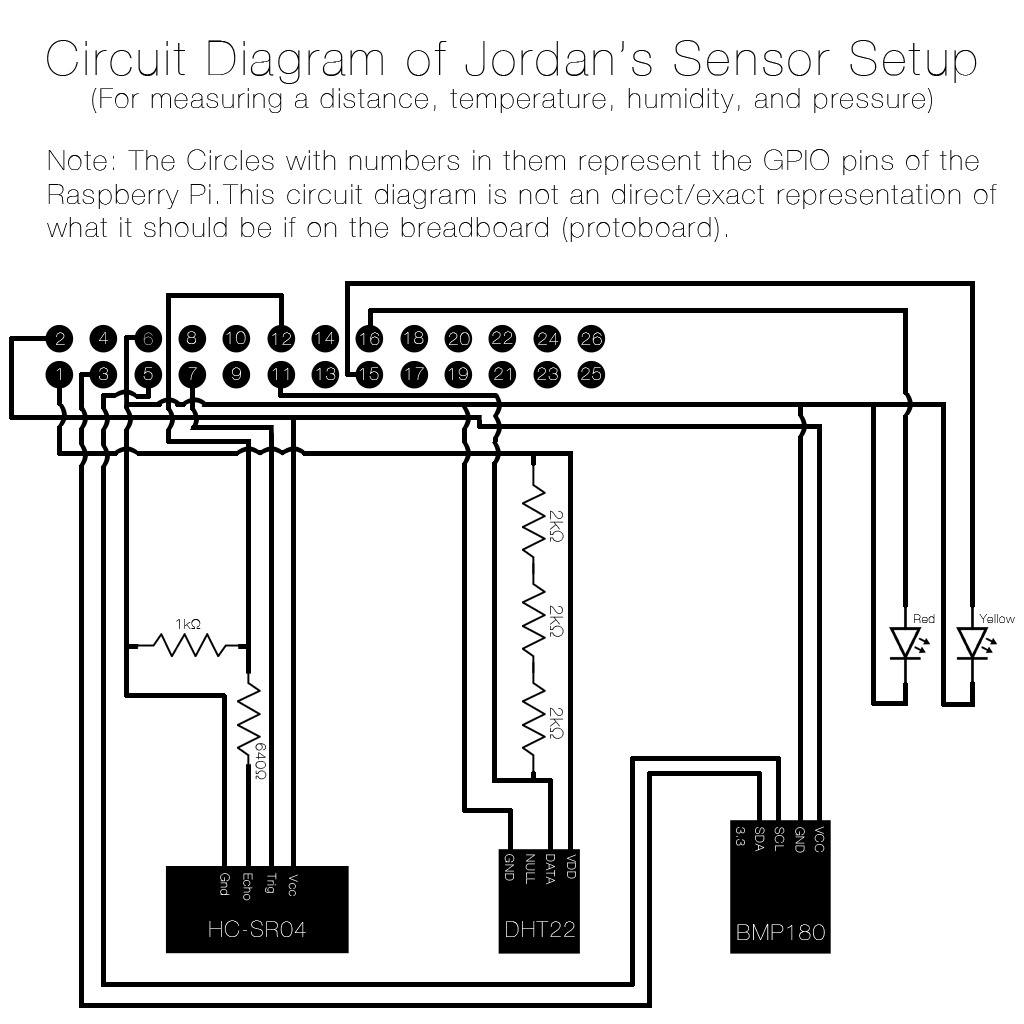
<style>
.page{position:relative;width:1024px;height:1024px;background:#ffffff}
.page>*{position:absolute;margin:0}
.t1{font:28px "HelveticaNeue-UltraLight";letter-spacing:0.075em;color:#000000}
.t2{font:48px "HelveticaNeue-UltraLight";letter-spacing:0.075em;color:#000000}
.t3{font:18px "HelveticaNeue-UltraLight";letter-spacing:0.075em}
.t4{font:18px "HelveticaNeue-UltraLight";letter-spacing:0.075em;color:#ffffff}
.t5{font:12px "HelveticaNeue-UltraLight";letter-spacing:0.075em;color:#000000}
.t6{font:12px "HelveticaNeue-UltraLight";letter-spacing:0.075em}
.t7{font:14px "HelveticaNeue-UltraLight";letter-spacing:0.075em;color:#000000}
.t8{font:14px "HelveticaNeue-UltraLight";letter-spacing:0.075em}
.t9{font:12px "HelveticaNeue-UltraLight";letter-spacing:0.075em;color:#ffffff}
.t10{font:22px "HelveticaNeue-UltraLight";letter-spacing:0.075em;color:#ffffff}
.t11{font:22px "HelveticaNeue-UltraLight";letter-spacing:0.075em}
</style>
<div class="page">
<p class="t1" style="left:47px;top:40px;width:930px;height:73px;text-align:center"><span class="t2">Circuit Diagram of Jordan’s Sensor Setup<br></span>(For measuring a distance, temperature, humidity, and pressure)</p>
<p class="t1" style="left:47px;top:149px;width:950px;height:93px">Note: The Circles with numbers in them represent the GPIO pins of the<br>Raspberry Pi.This circuit diagram is not an direct/exact representation of <br>what it should be if on the breadboard (protoboard).</p>
<p class="t3" style="left:56px;top:332px;width:9px;height:13px">2</p>
<p class="t3" style="left:99px;top:332px;width:9px;height:12px">4</p>
<p class="t3" style="left:143px;top:332px;width:10px;height:13px">6</p>
<p class="t3" style="left:186px;top:331px;width:10px;height:13px">8</p>
<p class="t4" style="left:226px;top:331px;width:20px;height:13px">10</p>
<p class="t4" style="left:272px;top:332px;width:20px;height:13px">12</p>
<p class="t4" style="left:315px;top:332px;width:20px;height:12px">14</p>
<p class="t4" style="left:360px;top:332px;width:20px;height:13px">16</p>
<p class="t4" style="left:404px;top:331px;width:20px;height:13px">18</p>
<p class="t3" style="left:449px;top:332px;width:21px;height:13px">20</p>
<p class="t3" style="left:492px;top:331px;width:21px;height:13px">22</p>
<p class="t4" style="left:538px;top:332px;width:21px;height:13px">24</p>
<p class="t3" style="left:581px;top:332px;width:21px;height:13px">26</p>
<p class="t3" style="left:56px;top:368px;width:5px;height:12px">1</p>
<p class="t3" style="left:99px;top:367px;width:9px;height:13px">3</p>
<p class="t3" style="left:143px;top:367px;width:10px;height:13px">5</p>
<p class="t3" style="left:188px;top:367px;width:9px;height:13px">7</p>
<p class="t4" style="left:232px;top:367px;width:9px;height:13px">9</p>
<p class="t4" style="left:272px;top:368px;width:17px;height:12px">11</p>
<p class="t3" style="left:316px;top:367px;width:20px;height:13px">13</p>
<p class="t3" style="left:359px;top:367px;width:20px;height:13px">15</p>
<p class="t4" style="left:405px;top:367px;width:19px;height:13px">17</p>
<p class="t3" style="left:448px;top:367px;width:20px;height:13px">19</p>
<p class="t3" style="left:494px;top:367px;width:17px;height:13px">21</p>
<p class="t4" style="left:537px;top:367px;width:21px;height:13px">23</p>
<p class="t4" style="left:581px;top:367px;width:20px;height:13px">25</p>
<p class="t3" style="left:550px;top:510px;width:14px;height:32px;rotate:90deg">2kΩ</p>
<p class="t3" style="left:550px;top:605px;width:14px;height:32px;rotate:90deg">2kΩ</p>
<p class="t5" style="left:914px;top:614px;width:21px;height:9px">Red</p>
<p class="t6" style="left:979px;top:614px;width:36px;height:9px">Yellow</p>
<p class="t7" style="left:176px;top:619px;width:25px;height:10px">1kΩ</p>
<p class="t3" style="left:550px;top:707px;width:14px;height:32px;rotate:90deg">2kΩ</p>
<p class="t8" style="left:255px;top:743px;width:12px;height:37px;rotate:90deg">640Ω</p>
<p class="t6" style="left:736px;top:827px;width:9px;height:19px;rotate:90deg">3.3</p>
<p class="t9" style="left:755px;top:827px;width:10px;height:25px;rotate:90deg">SDA</p>
<p class="t6" style="left:774px;top:827px;width:11px;height:25px;rotate:90deg">SCL</p>
<p class="t6" style="left:795px;top:827px;width:10px;height:26px;rotate:90deg">GND</p>
<p class="t6" style="left:814px;top:826px;width:11px;height:27px;rotate:90deg">VCC</p>
<p class="t9" style="left:504px;top:854px;width:11px;height:27px;rotate:90deg">GND</p>
<p class="t6" style="left:525px;top:854px;width:10px;height:31px;rotate:90deg">NULL</p>
<p class="t6" style="left:546px;top:854px;width:9px;height:31px;rotate:90deg">DATA</p>
<p class="t6" style="left:567px;top:854px;width:9px;height:25px;rotate:90deg">VDD</p>
<p class="t9" style="left:220px;top:873px;width:10px;height:22px;rotate:90deg">Gnd</p>
<p class="t6" style="left:243px;top:873px;width:10px;height:28px;rotate:90deg">Echo</p>
<p class="t6" style="left:265px;top:872px;width:12px;height:21px;rotate:90deg">Trig</p>
<p class="t6" style="left:288px;top:874px;width:10px;height:22px;rotate:90deg">Vcc</p>
<p class="t10" style="left:209px;top:920px;width:97px;height:17px">HC-SR04</p>
<p class="t11" style="left:506px;top:921px;width:69px;height:16px">DHT22</p>
<p class="t10" style="left:737px;top:924px;width:88px;height:16px">BMP180</p>
</div>
